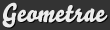
<style>
.page{position:relative;width:110px;height:30px;background:#333333}
.page>*{position:absolute;margin:0}
.t1{font:26px "Bello-Script";letter-spacing:0.01em;color:#ebebeb}
</style>
<div class="page">
<p class="t1" style="left:2px;top:2px;width:106px;height:26px">Geometrae</p>
</div>
